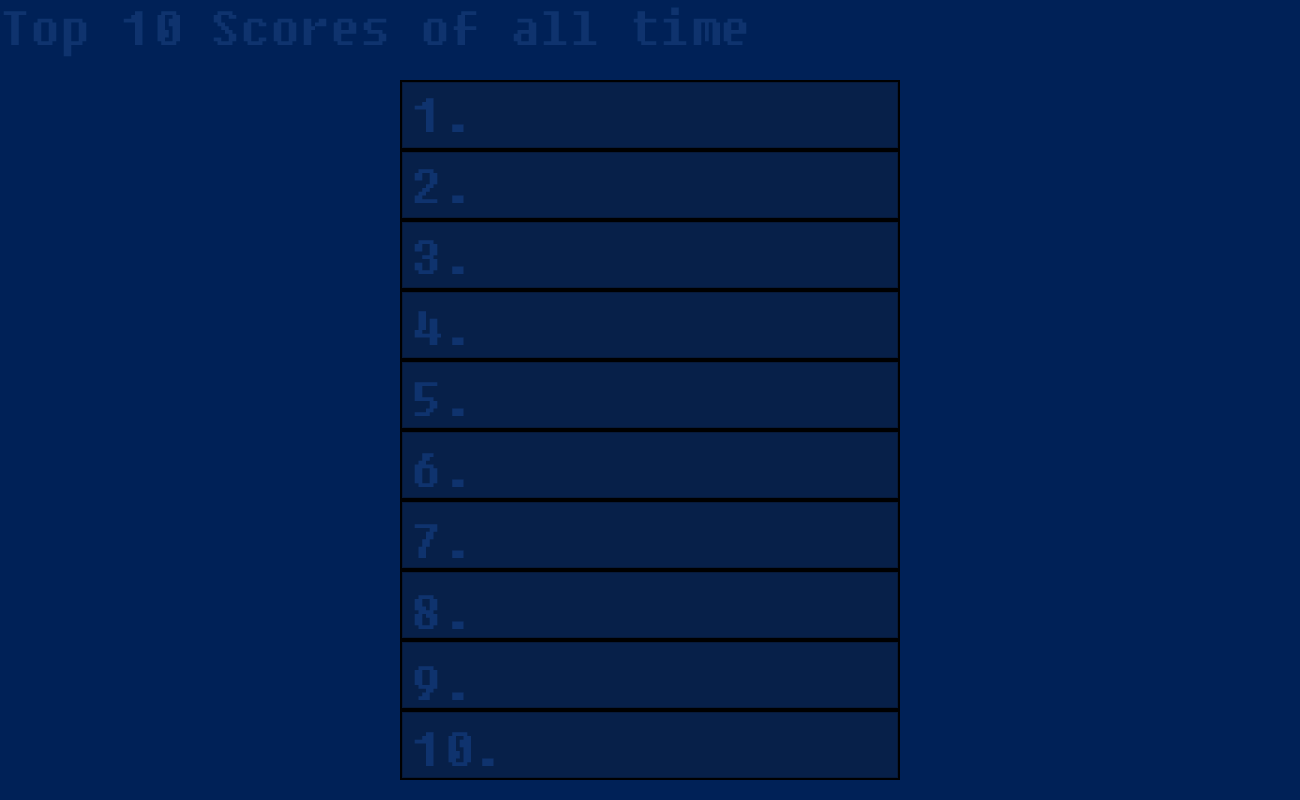
<style>
.page{position:relative;width:1300px;height:800px;background:#002157}
.page>*{position:absolute;margin:0}
.t1{font:48px "Fixedsys";color:#0f336e}
</style>
<div class="page">
<p class="t1" style="left:3px;top:7px;width:744px;height:50px">Top 10 Scores of all time</p>
<p class="t1" style="left:414px;top:98px;width:50px;height:34px">1.</p>
<p class="t1" style="left:414px;top:169px;width:50px;height:34px">2.</p>
<p class="t1" style="left:414px;top:240px;width:50px;height:34px">3.</p>
<p class="t1" style="left:414px;top:311px;width:50px;height:34px">4.</p>
<p class="t1" style="left:414px;top:382px;width:50px;height:34px">5.</p>
<p class="t1" style="left:414px;top:453px;width:50px;height:34px">6.</p>
<p class="t1" style="left:414px;top:524px;width:50px;height:34px">7.</p>
<p class="t1" style="left:414px;top:595px;width:50px;height:34px">8.</p>
<p class="t1" style="left:414px;top:666px;width:50px;height:34px">9.</p>
<p class="t1" style="left:414px;top:732px;width:80px;height:34px">10.</p>
</div>
